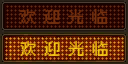
<style>
.page{position:relative;width:128px;height:64px}
.page>*{position:absolute;margin:0}
.t1{font:16px "Ark-Pixel-12px-Monospaced-zh_cn-Regular";color:#763413}
.t2{font:16px "Ark-Pixel-12px-Monospaced-zh_cn-Regular";color:#edbc15}
</style>
<div class="page">
<p class="t1" style="left:20px;top:8px;width:88px;height:16px">欢 迎 光 临</p>
<p class="t2" style="left:20px;top:40px;width:88px;height:16px">欢 迎 光 临</p>
</div>
